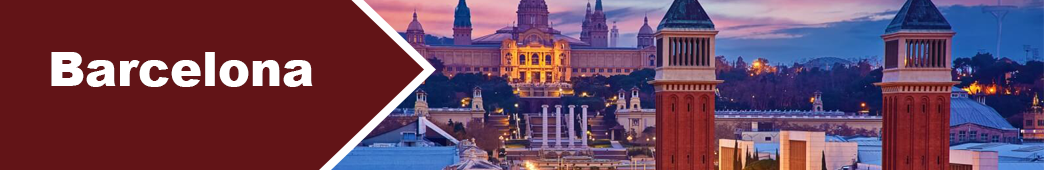
<style>
.page{position:relative;width:1044px;height:170px;background:#621417}
.page>*{position:absolute;margin:0}
.t1{font:48px "Arial-Black";color:#ffffff}
</style>
<div class="page">
<p class="t1" style="left:51px;top:52px;width:262px;height:35px">Barcelona</p>
</div>
